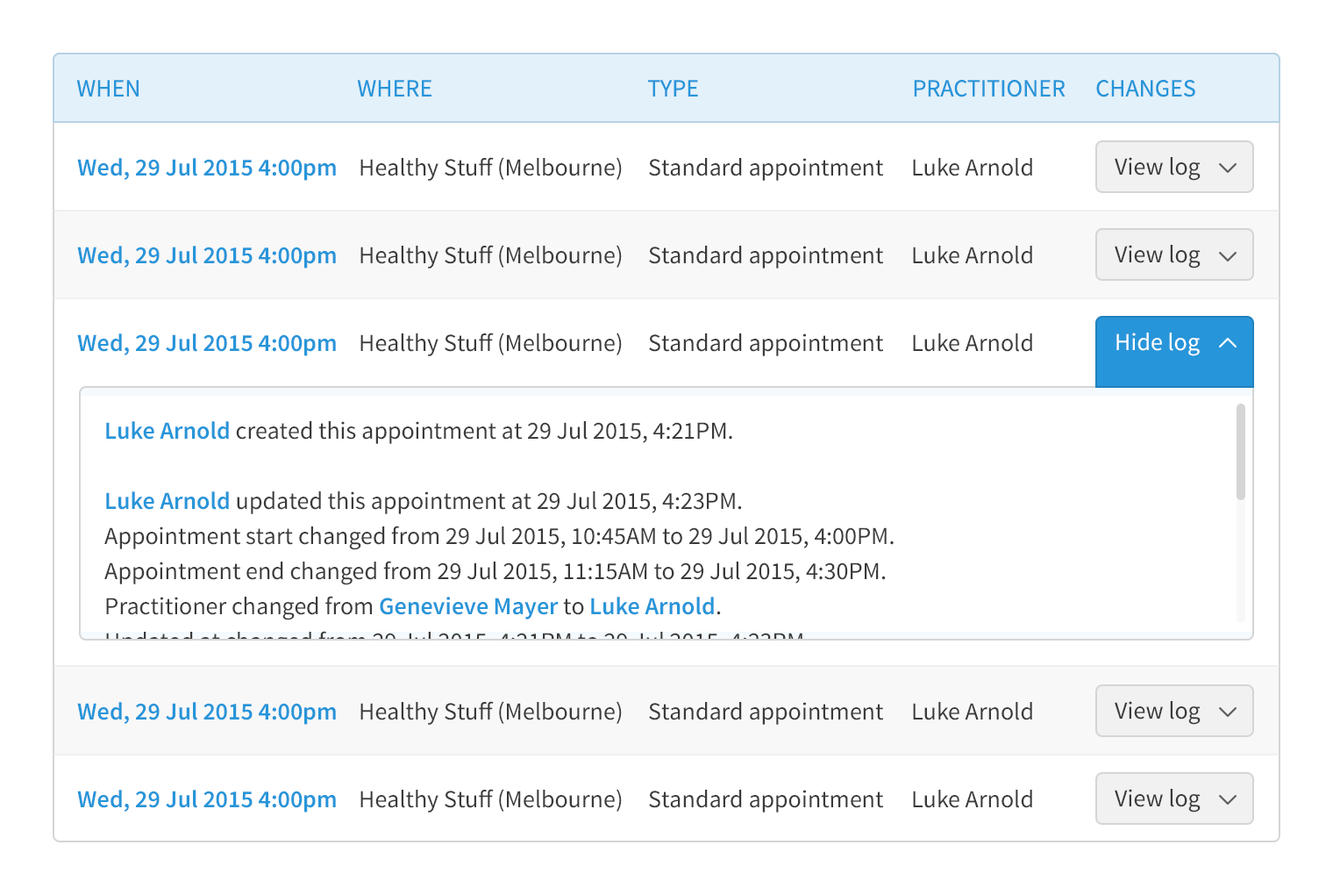
<style>
.page{position:relative;width:1333px;height:895px;background:#ffffff}
.page>*{position:absolute;margin:0}
.t1{font:24.6px "SourceSansPro-Regular";color:#2795d9;text-transform:uppercase}
.t2{font:24.6px "SourceSansPro-Semibold";color:#2795d9}
.t3{font:24.6px "SourceSansPro-Regular";color:#3a3a3a}
.t4{font:24.6px "SourceSansPro-Regular";color:#ffffff}
.t5{font:24.6px/35.1px "SourceSansPro-Regular";color:#3a3a3a}
.t6{font:24.6px/35.1px "SourceSansPro-Semibold";color:#2795d9}
</style>
<div class="page">
<p class="t1" style="left:76px;top:80px;width:63px;height:16px">When</p>
<p class="t1" style="left:357px;top:80px;width:74px;height:16px">Where</p>
<p class="t1" style="left:648px;top:80px;width:50px;height:16px">Type</p>
<p class="t1" style="left:914px;top:80px;width:152px;height:17px">Practitioner</p>
<p class="t1" style="left:1096px;top:80px;width:99px;height:17px">Changes</p>
<p class="t2" style="left:77px;top:158px;width:259px;height:23px">Wed, 29 Jul 2015 4:00pm</p>
<p class="t3" style="left:360px;top:157px;width:262px;height:24px">Healthy Stuff (Melbourne)</p>
<p class="t3" style="left:649px;top:158px;width:234px;height:23px">Standard appointment</p>
<p class="t3" style="left:913px;top:158px;width:119px;height:18px">Luke Arnold</p>
<p class="t3" style="left:1115px;top:157px;width:86px;height:24px">View log</p>
<p class="t2" style="left:77px;top:246px;width:259px;height:22px">Wed, 29 Jul 2015 4:00pm</p>
<p class="t3" style="left:360px;top:245px;width:262px;height:23px">Healthy Stuff (Melbourne)</p>
<p class="t3" style="left:649px;top:246px;width:234px;height:22px">Standard appointment</p>
<p class="t3" style="left:913px;top:246px;width:119px;height:18px">Luke Arnold</p>
<p class="t3" style="left:1115px;top:245px;width:86px;height:23px">View log</p>
<p class="t2" style="left:77px;top:333px;width:259px;height:23px">Wed, 29 Jul 2015 4:00pm</p>
<p class="t3" style="left:360px;top:332px;width:262px;height:24px">Healthy Stuff (Melbourne)</p>
<p class="t3" style="left:649px;top:333px;width:234px;height:23px">Standard appointment</p>
<p class="t3" style="left:913px;top:333px;width:119px;height:19px">Luke Arnold</p>
<p class="t4" style="left:1116px;top:332px;width:84px;height:24px">Hide log</p>
<p class="t5" style="left:104px;top:421px;width:790px;height:374px"><span class="t6">Luke Arnold</span> created this appointment at 29 Jul 2015, 4:21PM.<br><br><span class="t6">Luke Arnold</span> updated this appointment at 29 Jul 2015, 4:23PM. <br>Appointment start changed from 29 Jul 2015, 10:45AM to 29 Jul 2015, 4:00PM. <br>Appointment end changed from 29 Jul 2015, 11:15AM to 29 Jul 2015, 4:30PM. <br>Practitioner changed from <span class="t6">Genevieve Mayer</span> to <span class="t6">Luke Arnold</span>. <br>Updated at changed from 29 Jul 2015, 4:21PM to 29 Jul 2015, 4:23PM.<br><br><span class="t6">Luke Arnold</span> updated this appointment at 29 Jul 2015, 4:26PM. <br>Patient arrived changed from No to Yes. <br>Updated at changed from 29 Jul 2015, 4:23PM to 29 Jul 2015, 4:26PM.</p>
<p class="t2" style="left:77px;top:702px;width:259px;height:22px">Wed, 29 Jul 2015 4:00pm</p>
<p class="t3" style="left:360px;top:701px;width:262px;height:23px">Healthy Stuff (Melbourne)</p>
<p class="t3" style="left:649px;top:702px;width:234px;height:22px">Standard appointment</p>
<p class="t3" style="left:913px;top:702px;width:119px;height:18px">Luke Arnold</p>
<p class="t3" style="left:1115px;top:701px;width:86px;height:23px">View log</p>
<p class="t2" style="left:77px;top:789px;width:259px;height:23px">Wed, 29 Jul 2015 4:00pm</p>
<p class="t3" style="left:360px;top:788px;width:262px;height:24px">Healthy Stuff (Melbourne)</p>
<p class="t3" style="left:649px;top:789px;width:234px;height:23px">Standard appointment</p>
<p class="t3" style="left:913px;top:789px;width:119px;height:19px">Luke Arnold</p>
<p class="t3" style="left:1115px;top:788px;width:86px;height:24px">View log</p>
</div>
